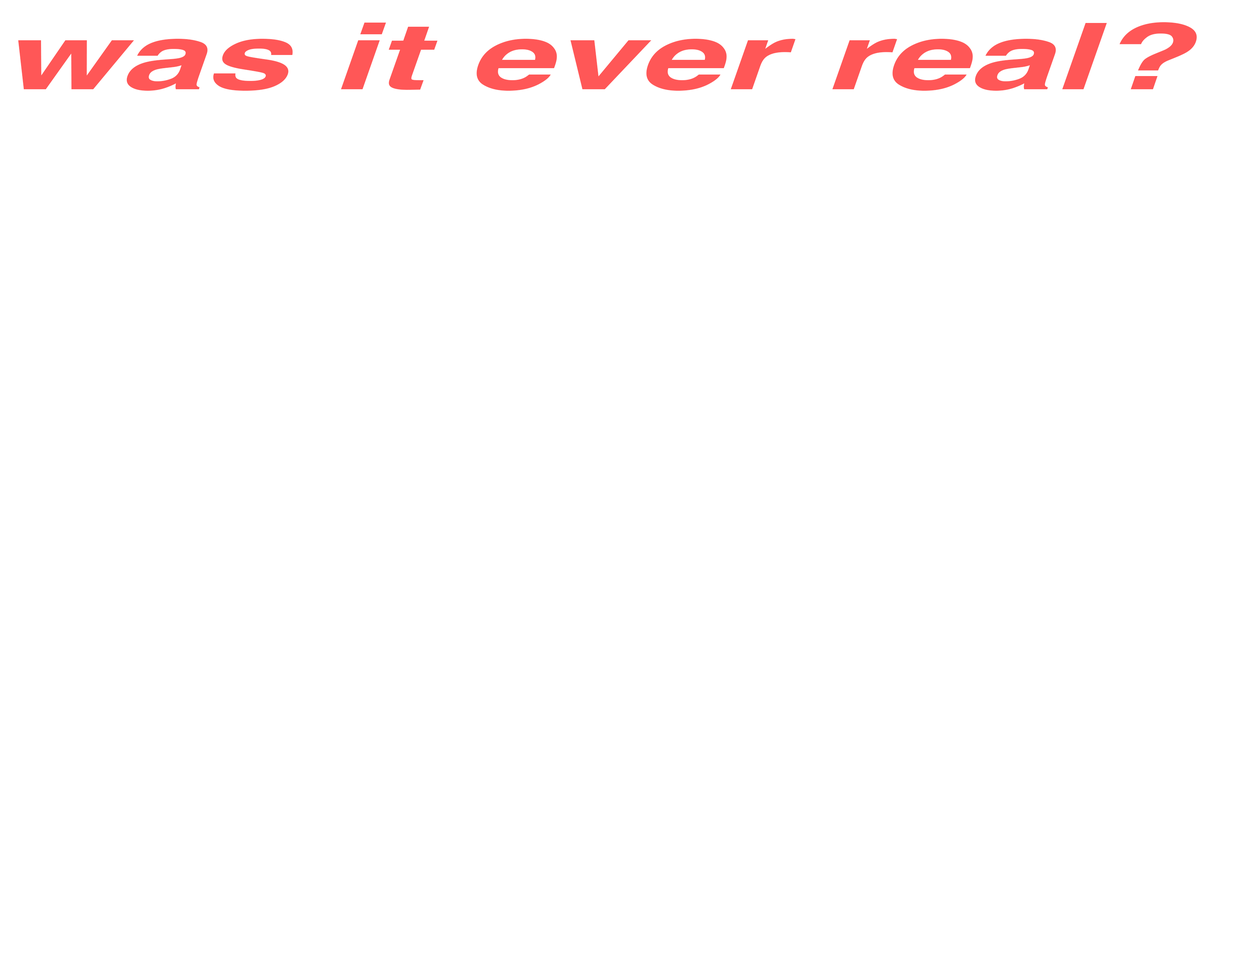
<style>
.page{position:relative;width:1242px;height:960px;background:#ffffff}
.page>*{position:absolute;margin:0}
.t1{font:92.1px "Helvetica-BoldOblique";color:#ff5757;scale:1.66 1}
</style>
<div class="page">
<p class="t1" style="left:18px;top:22px;width:1179px;height:69px">was it ever real?</p>
</div>
